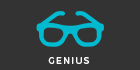
<style>
.page{position:relative;width:140px;height:70px;background:#333333}
.page>*{position:absolute;margin:0}
.t1{font:9px "Montserrat-Regular";letter-spacing:0.15em;color:#fafafa;text-transform:uppercase}
</style>
<div class="page">
<p class="t1" style="left:48px;top:57px;width:41px;height:7px">GENIUS</p>
</div>
